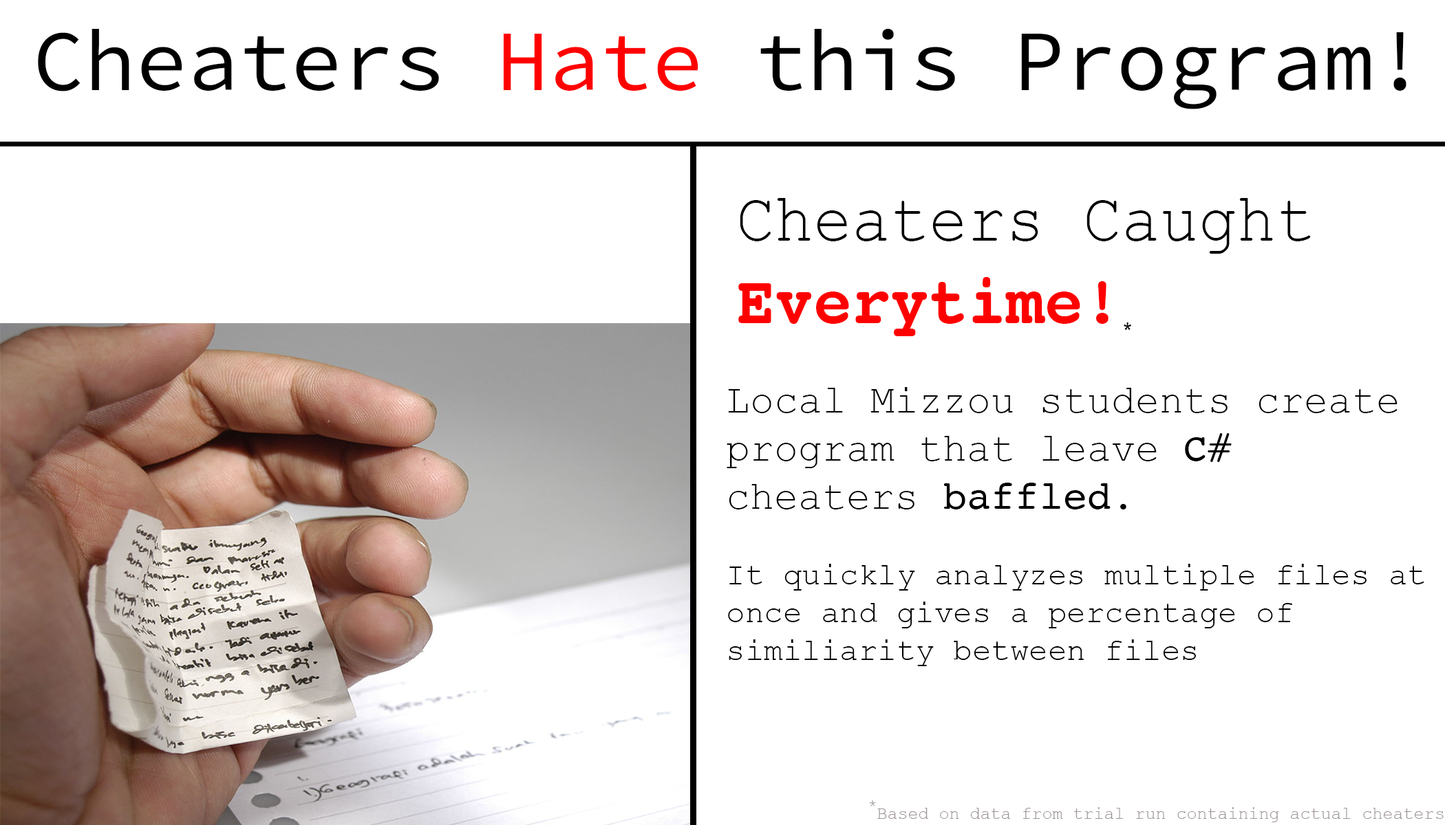
<style>
.page{position:relative;width:1445px;height:825px;background:#ffffff}
.page>*{position:absolute;margin:0}
.t1{font:86px "SourceCodePro-Regular";color:#000000}
.t2{font:86px "SourceCodePro-Regular";color:#ff0000}
.t3{font:68.8px "CourierNewPSMT";color:#000000;scale:0.93 1}
.t4{font:68.8px "Courier-Bold";color:#ff0000;scale:0.93 1}
.t5{font:34.4px "Courier-Bold";letter-spacing:-0.1em;color:#000000;scale:0.93 1}
.t6{font:31.5px "CourierNewPSMT";color:#000000}
.t7{font:40.1px "CourierNewPSMT";color:#000000}
.t8{font:40.1px "Courier";color:#000000}
.t9{font:17.2px "CourierNewPSMT";color:#9f9696}
.t10{font:25.8px "CourierNewPSMT";color:#9f9696}
</style>
<div class="page">
<p class="t1" style="left:38px;top:28px;width:1368px;height:81px">Cheaters <span class="t2">Hate</span> this Program!</p>
<p class="t3" style="left:738px;top:198px;width:572px;height:138px">Cheaters Caught <span class="t4">Everytime!</span><span class="t5">*</span></p>
<p class="t6" style="left:726px;top:387px;width:698px;height:280px"><span class="t7">Local Mizzou students create program that leave </span><span class="t8">C#</span><span class="t7"> cheaters </span><span class="t8">baffled</span><span class="t7">. <br></span><br>It quickly analyzes multiple files at once and gives a percentage of similiarity between files</p>
<p class="t9" style="left:869px;top:801px;width:574px;height:22px"><span class="t10">*</span>Based on data from trial run containing actual cheaters</p>
</div>
